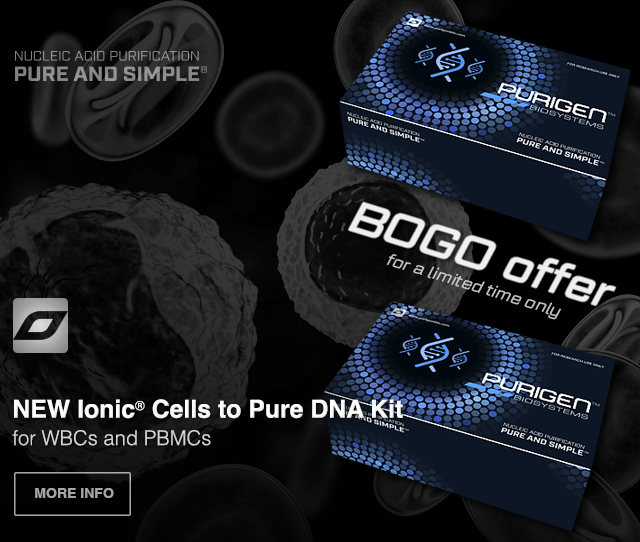
<style>
.page{position:relative;width:640px;height:542px}
.page>*{position:absolute;margin:0}
.t1{font:44px "GeomGraphic-Regular";color:#efefef;font-style:italic}
.t2{font:16.1px "GeomGraphic-Light";color:#c2c2c2;font-style:italic}
.t3{font:24.8px/27.4px "Helvetica-Bold";color:#ffffff}
.t4{font:22.1px/27.4px "Helvetica";color:#ffffff}
.t5{font:20.2px/27.4px "Helvetica-Light";color:#d6d6d6}
.t6{font:14.3px "Helvetica-Bold";letter-spacing:-0.01em;color:#a6a6a6;text-transform:uppercase}
</style>
<div class="page">
<p class="t1" style="left:348px;top:202px;width:268px;height:104px;rotate:17deg">BOGO offer</p>
<p class="t2" style="left:386px;top:254px;width:175px;height:66px;rotate:17deg">for a limited time only</p>
<p class="t3" style="left:12px;top:399px;width:391px;height:47px">NEW Ionic<span class="t4">® </span>Cells to Pure DNA Kit<br><span class="t5">for WBCs and PBMCs</span></p>
<p class="t6" style="left:35px;top:488px;width:79px;height:10px">MORE INFO</p>
</div>
